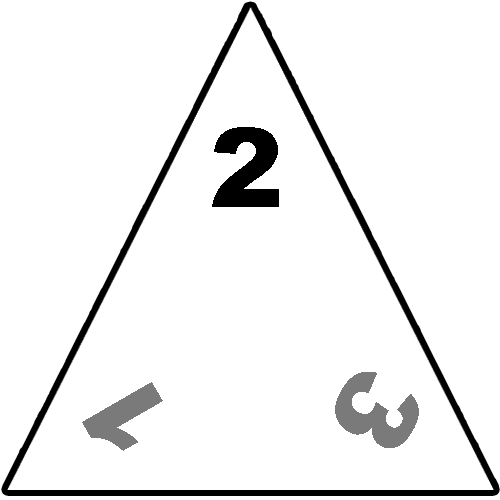
<style>
.page{position:relative;width:500px;height:500px;background:#ffffff}
.page>*{position:absolute;margin:0}
.t1{font:110.8px "Arial-Black";color:#000000}
.t2{font:110.8px "Arial-Black";color:#7a7a7a}
</style>
<div class="page">
<p class="t1" style="left:212px;top:127px;width:67px;height:80px">2</p>
<p class="t2" style="left:335px;top:372px;width:84px;height:76px;rotate:120deg">3</p>
<p class="t2" style="left:82px;top:382px;width:81px;height:69px;rotate:-120deg">1</p>
</div>
